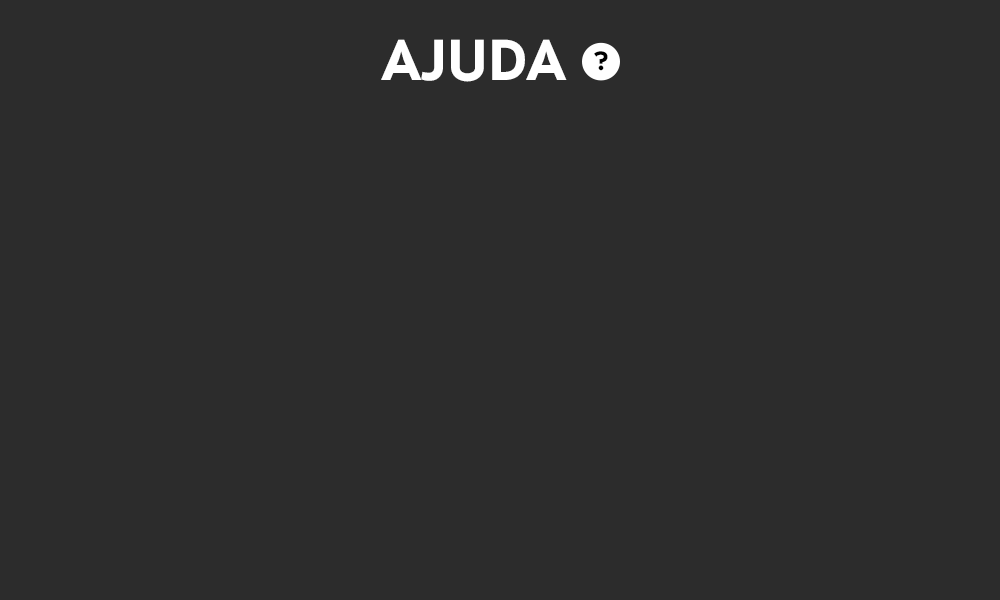
<style>
.page{position:relative;width:1000px;height:600px;background:#2c2c2c}
.page>*{position:absolute;margin:0}
.t1{font:57.6px "Myra4FCaps-Bold";color:#ffffff}
.t2{font:25.4px "Myra4FCaps-Bold";color:#000000}
</style>
<div class="page">
<p class="t1" style="left:381px;top:39px;width:186px;height:43px">ajuda</p>
<p class="t2" style="left:594px;top:51px;width:14px;height:20px">?</p>
</div>
